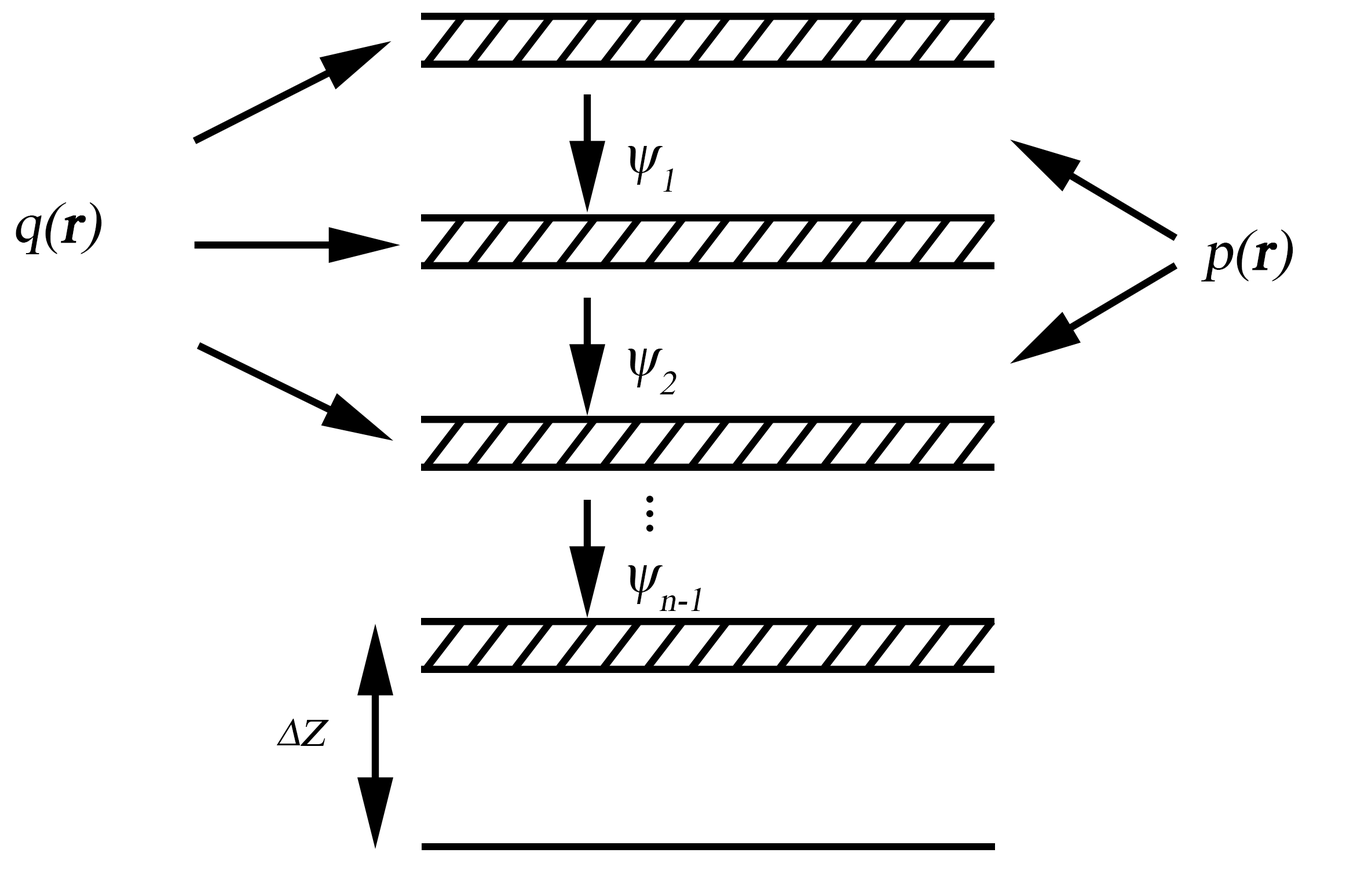
<style>
.page{position:relative;width:1368px;height:871px;background:#ffffff}
.page>*{position:absolute;margin:0}
.t1{font:57.9px "TimesNewRomanPSMT";color:#000000;font-style:italic}
.t2{font:57.9px "TimesNewRomanPSMT";color:#000000;font-weight:bold;font-style:italic}
.t3{font:67.6px "TimesNewRomanPSMT";color:#000000;font-style:italic}
</style>
<div class="page">
<p class="t1" style="left:628px;top:146px;width:46px;height:46px">ψ1</p>
<p class="t1" style="left:16px;top:202px;width:86px;height:52px">q(<span class="t2">r</span>)</p>
<p class="t1" style="left:1202px;top:229px;width:92px;height:53px">p(<span class="t2">r</span>)</p>
<p class="t1" style="left:628px;top:349px;width:49px;height:46px">ψ2</p>
<p class="t1" style="left:628px;top:565px;width:74px;height:46px">ψn-1</p>
<p class="t3" style="left:276px;top:719px;width:24px;height:27px">Δ</p>
<p class="t1" style="left:301px;top:720px;width:28px;height:26px">z</p>
</div>
